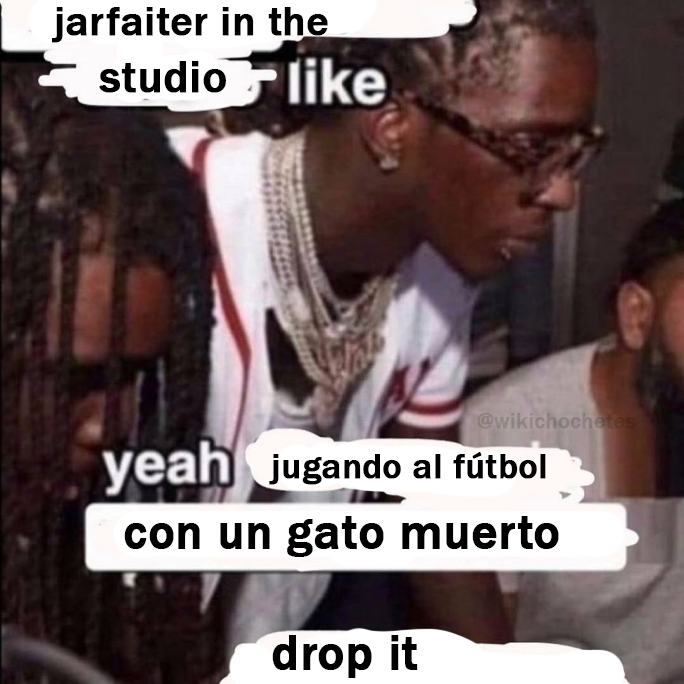
<style>
.page{position:relative;width:684px;height:684px}
.page>*{position:absolute;margin:0}
.t1{font:42.4px "FranklinGothic-Medium";color:#000000;font-weight:bold}
.t2{font:46.1px "FranklinGothic-Medium";color:#000000;font-weight:bold}
.t3{font:22.1px "FranklinGothic-Medium";color:#8c7f7f;font-weight:bold}
.t4{font:36px "FranklinGothic-Medium";color:#000000;font-weight:bold}
.t5{font:49.4px "FranklinGothic-Medium";color:#000000;font-weight:bold}
.t6{font:50.2px "FranklinGothic-Medium";color:#000000;font-weight:bold}
</style>
<div class="page">
<p class="t1" style="left:52px;top:7px;width:276px;height:36px">jarfaiter in the</p>
<p class="t2" style="left:99px;top:61px;width:127px;height:32px">studio</p>
<p class="t3" style="left:477px;top:413px;width:159px;height:16px">@wikichochetes</p>
<p class="t4" style="left:269px;top:452px;width:277px;height:33px">jugando al fútbol</p>
<p class="t5" style="left:124px;top:516px;width:435px;height:41px">con un gato muerto</p>
<p class="t6" style="left:272px;top:635px;width:146px;height:43px">drop it</p>
</div>
